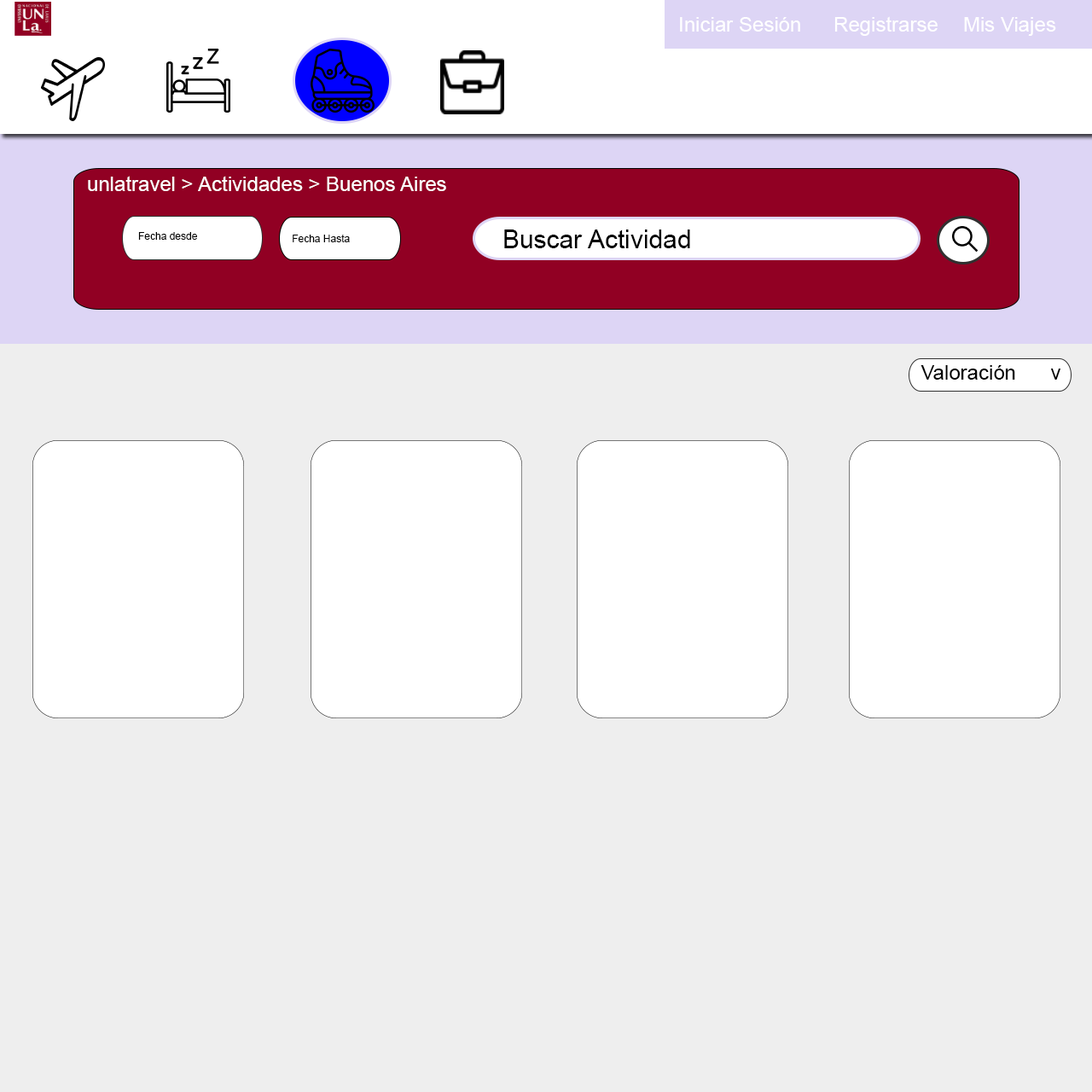
<style>
.page{position:relative;width:1092px;height:1092px;background:#eeeeee}
.page>*{position:absolute;margin:0}
.t1{font:20.5px "ArialMT";color:#ffffff}
.t2{font:10.2px "ArialMT";color:#000000}
.t3{font:25.6px "ArialMT";color:#000000}
.t4{font:20.5px "ArialMT";color:#000000}
</style>
<div class="page">
<p class="t1" style="left:680px;top:17px;width:120px;height:15px">Iniciar Sesión</p>
<p class="t1" style="left:834px;top:16px;width:104px;height:20px">Registrarse</p>
<p class="t1" style="left:964px;top:17px;width:92px;height:19px">Mis Viajes</p>
<p class="t1" style="left:88px;top:176px;width:358px;height:15px">unlatravel &gt; Actividades &gt; Buenos Aires</p>
<p class="t2" style="left:138px;top:232px;width:59px;height:8px">Fecha desde</p>
<p class="t3" style="left:504px;top:229px;width:186px;height:19px">Buscar Actividad</p>
<p class="t2" style="left:293px;top:235px;width:57px;height:7px">Fecha Hasta</p>
<p class="t4" style="left:921px;top:365px;width:94px;height:15px">Valoración</p>
<p class="t4" style="left:1050px;top:369px;width:11px;height:11px">v</p>
</div>
